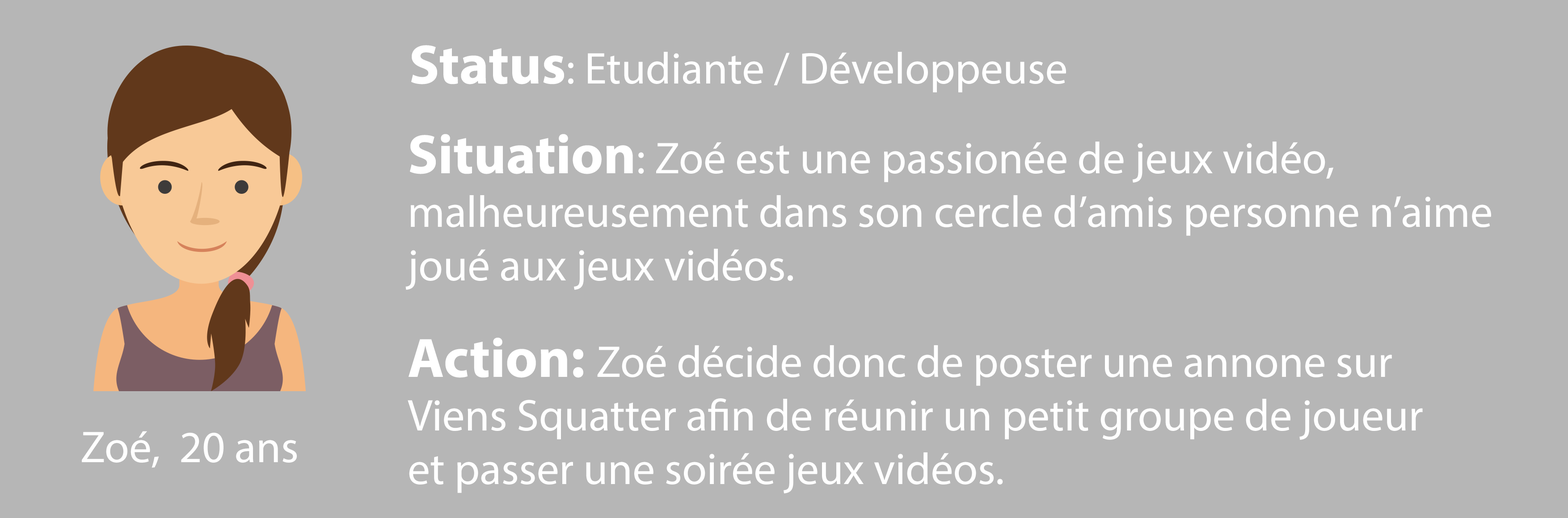
<style>
.page{position:relative;width:1568px;height:518px;background:#b6b6b6}
.page>*{position:absolute;margin:0}
.t1{font:44.7px "MyriadPro-Regular";color:#ffffff}
.t2{font:55.9px "MyriadPro-Bold";color:#ffffff}
</style>
<div class="page">
<p class="t1" style="left:411px;top:45px;width:655px;height:48px"><span class="t2">Status</span>: Etudiante / Développeuse</p>
<p class="t1" style="left:405px;top:134px;width:1086px;height:156px"><span class="t2">Situation</span>: Zoé est une passionée de jeux vidéo, <br>malheureusement dans son cercle d’amis personne n’aime<br>joué aux jeux vidéos.</p>
<p class="t1" style="left:408px;top:338px;width:1015px;height:156px"><span class="t2">Action: </span>Zoé décide donc de poster une annone sur <br>Viens Squatter afin de réunir un petit groupe de joueur<br>et passer une soirée jeux vidéos.</p>
<p class="t1" style="left:82px;top:431px;width:215px;height:37px">Zoé,  20 ans</p>
</div>
